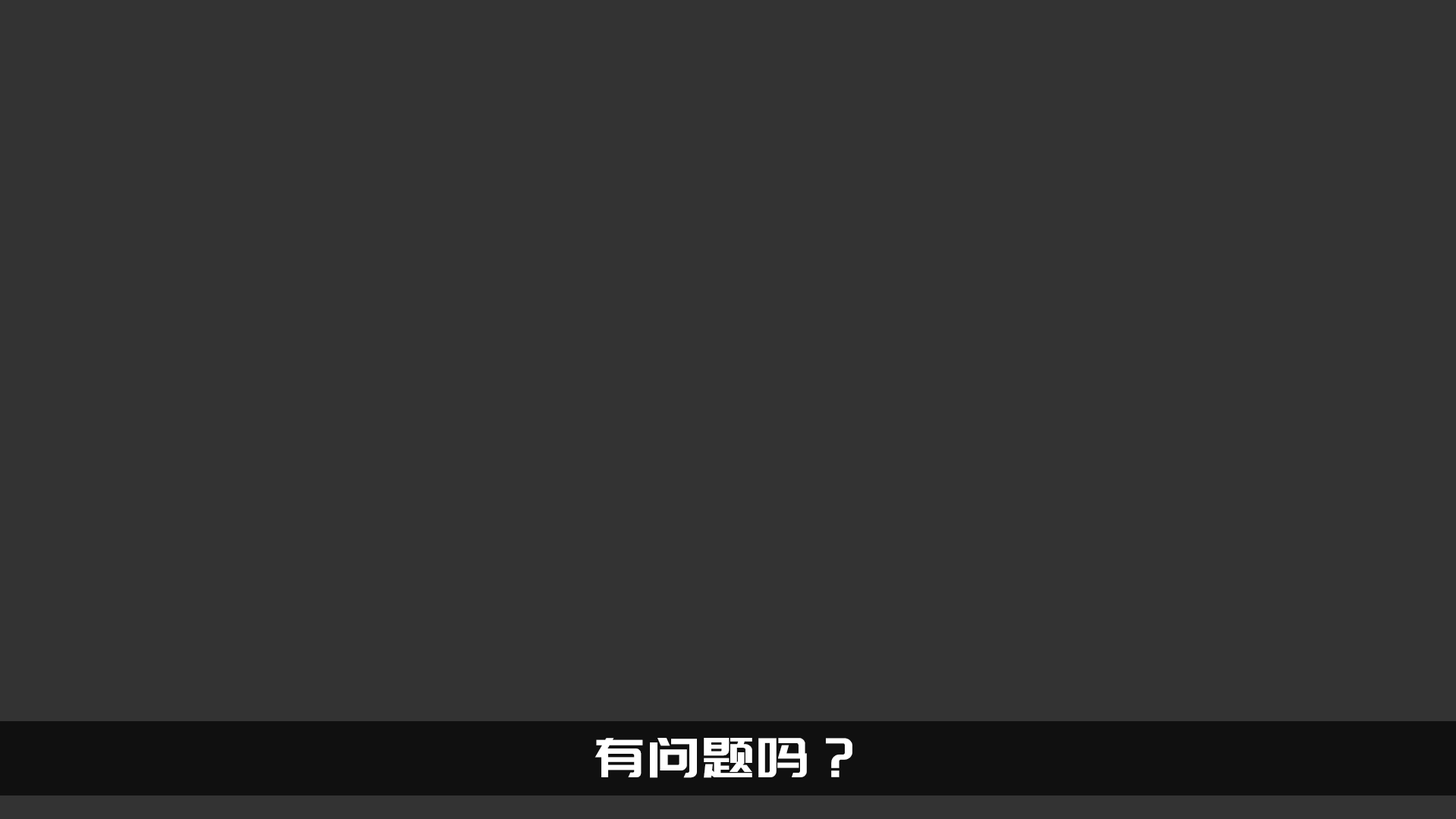
<style>
.page{position:relative;width:1456px;height:819px;background:#333333}
.page>*{position:absolute;margin:0}
.t1{font:54.6px "PangMenZhengDao-3";color:#ffffff}
</style>
<div class="page">
<p class="t1" style="left:595px;top:738px;width:257px;height:40px">有问题吗？</p>
</div>
